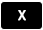
<style>
.page{position:relative;width:43px;height:30px;background:#000000}
.page>*{position:absolute;margin:0}
.t1{font:15px "SourceSansPro-Regular";color:#ffffff;text-transform:uppercase;font-weight:bold}
</style>
<div class="page">
<p class="t1" style="left:18px;top:10px;width:8px;height:11px">X</p>
</div>
